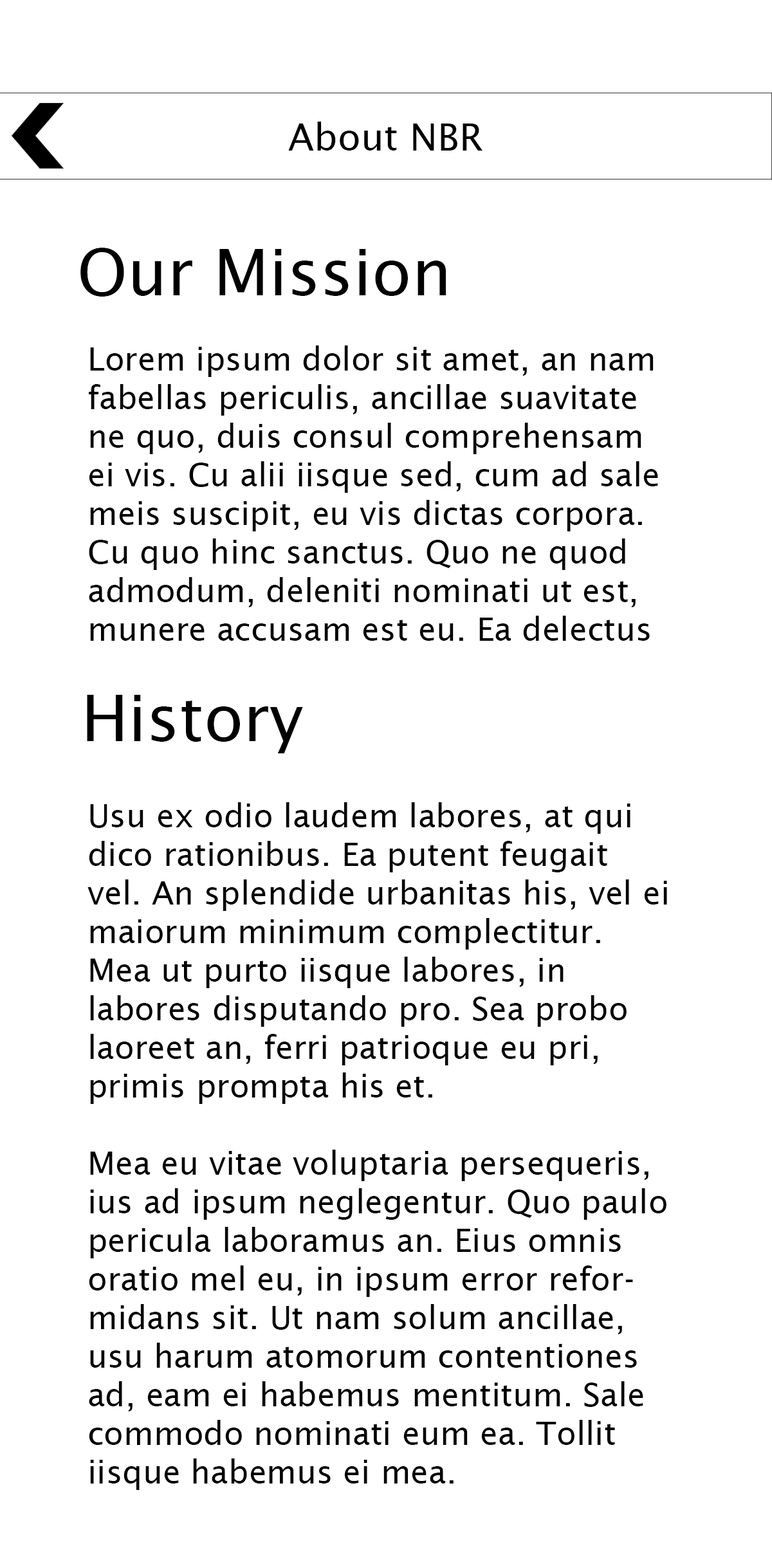
<style>
.page{position:relative;width:772px;height:1544px;background:#ffffff}
.page>*{position:absolute;margin:0}
.t1{font:37.5px "LucidaSans";color:#000000}
.t2{font:64.3px "LucidaSans";color:#000000}
.t3{font:7.7px "LucidaSans";color:#000000}
</style>
<div class="page">
<p class="t1" style="left:288px;top:122px;width:195px;height:29px">About NBR</p>
<p class="t2" style="left:80px;top:248px;width:366px;height:49px">Our Mission</p>
<p class="t3" style="left:89px;top:346px;width:569px;height:295px">Lorem ipsum dolor sit amet, an nam fabellas periculis, ancillae suavitate ne quo, duis consul comprehensam ei vis. Cu alii iisque sed, cum ad sale meis suscipit, eu vis dictas corpora. Cu quo hinc sanctus. Quo ne quod admodum, deleniti nominati ut est, munere accusam est eu. Ea delectus mandamus vis, equidem splendide et sea.</p>
<p class="t2" style="left:87px;top:695px;width:216px;height:58px">History</p>
<p class="t3" style="left:88px;top:802px;width:579px;height:688px">Usu ex odio laudem labores, at qui dico rationibus. Ea putent feugait vel. An splendide urbanitas his, vel ei maiorum minimum complectitur. Mea ut purto iisque labores, in labores disputando pro. Sea probo laoreet an, ferri patrioque eu pri, primis prompta his et.<br><br>Mea eu vitae voluptaria persequeris, ius ad ipsum neglegentur. Quo paulo pericula laboramus an. Eius omnis oratio mel eu, in ipsum error reformidans sit. Ut nam solum ancillae, usu harum atomorum contentiones ad, eam ei habemus mentitum. Sale commodo nominati eum ea. Tollit iisque habemus ei mea.<br><br>Dicunt inciderint persequeris ne sed. Mea cu nisl labitur eripuit, omnis porro vel et. Nam at indoctum voluptatibus, essent saperet gloriatur est ad. Cu pri delectus ponderum, at his ludus causae vocent.<br><br>Mea delectus adolescens in, cu eam deserunt conceptam dissentiet. Idque deserunt ea per, ex eam sale ignota vivendum. Ea suas pertinacia eum, utamur aliquam cotidieque nec eu. Ea pri posse laudem dignissim, vel dicunt audiam ad, vix ne elitr dolore saperet. Mei cu homero saperet, ubique postea propriae mei ei. Nec suas rationibus vituperatoribus te.</p>
</div>
